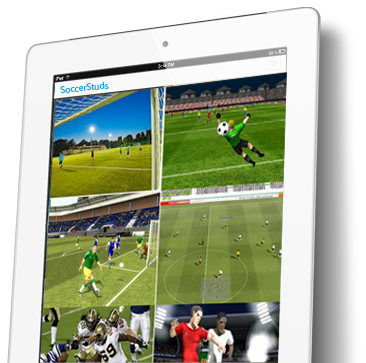
<style>
.page{position:relative;width:366px;height:363px}
.page>*{position:absolute;margin:0}
.t1{font:9px "Ebrima"}
</style>
<div class="page">
<p class="t1" style="left:60px;top:81px;width:49px;height:13px;rotate:-6deg">SoccerStuds</p>
</div>
